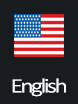
<style>
.page{position:relative;width:78px;height:104px;background:#191c1f}
.page>*{position:absolute;margin:0}
.t1{font:20.8px "Calibri";letter-spacing:-0.1em;color:#ffffff;scale:1.22 1}
</style>
<div class="page">
<p class="t1" style="left:12px;top:78px;width:54px;height:19px">English</p>
</div>
